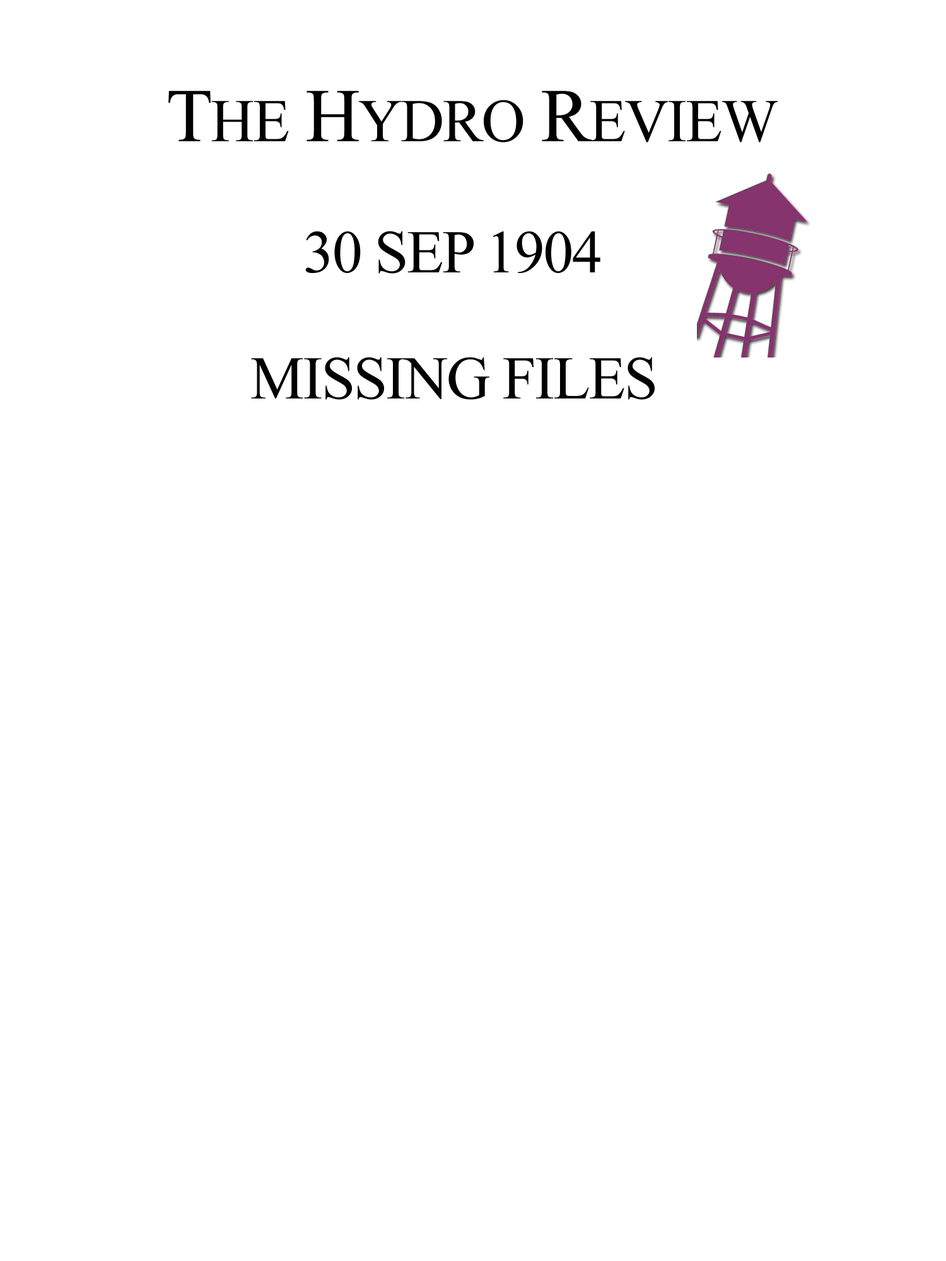
<style>
.page{position:relative;width:946px;height:1261px;background:#ffffff}
.page>*{position:absolute;margin:0}
.t1{font:60.5px "TimesNewRomanPSMT";letter-spacing:-0.025em;color:#000000}
.t2{font:75.7px "TimesNewRomanPSMT";letter-spacing:-0.025em;color:#000000}
</style>
<div class="page">
<p class="t1" style="left:168px;top:91px;width:610px;height:51px"><span class="t2">T</span>HE<span class="t2"> H</span>YDRO<span class="t2"> R</span>EVIEW</p>
<p class="t1" style="left:305px;top:231px;width:295px;height:43px">30 SEP 1904</p>
<p class="t1" style="left:251px;top:357px;width:403px;height:43px">MISSING FILES</p>
</div>
